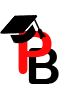
<style>
.page{position:relative;width:79px;height:98px;background:#ffffff}
.page>*{position:absolute;margin:0}
.t1{font:60px "ArialRoundedMTBold";letter-spacing:0.04em;color:#ff0b0b}
.t2{font:50px "ArialRoundedMTBold";letter-spacing:0.04em;color:#010101}
</style>
<div class="page">
<p class="t1" style="left:18px;top:31px;width:34px;height:43px">P</p>
<p class="t2" style="left:28px;top:48px;width:31px;height:36px">B</p>
</div>
